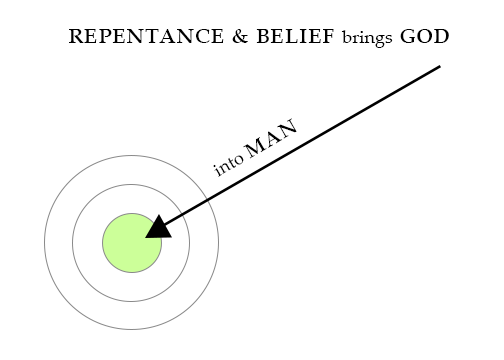
<style>
.page{position:relative;width:504px;height:360px;background:#ffffff}
.page>*{position:absolute;margin:0}
.t1{font:30px "PalatinoLinotype-Roman";color:#000000;font-variant:small-caps}
.t2{font:18px "PalatinoLinotype-Roman";color:#000000}
</style>
<div class="page">
<p class="t1" style="left:69px;top:29px;width:380px;height:19px">repentance &amp; belief <span class="t2">brings</span> god</p>
<p class="t2" style="left:213px;top:118px;width:84px;height:59px;rotate:-30deg">into <span class="t1">man</span></p>
</div>
